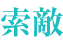
<style>
.page{position:relative;width:63px;height:43px;background:#ffffff}
.page>*{position:absolute;margin:0}
.t1{font:32px "RyuminPro-ExBold";color:#1dbdc0}
</style>
<div class="page">
<p class="t1" style="left:1px;top:6px;width:63px;height:31px">索敵</p>
</div>
